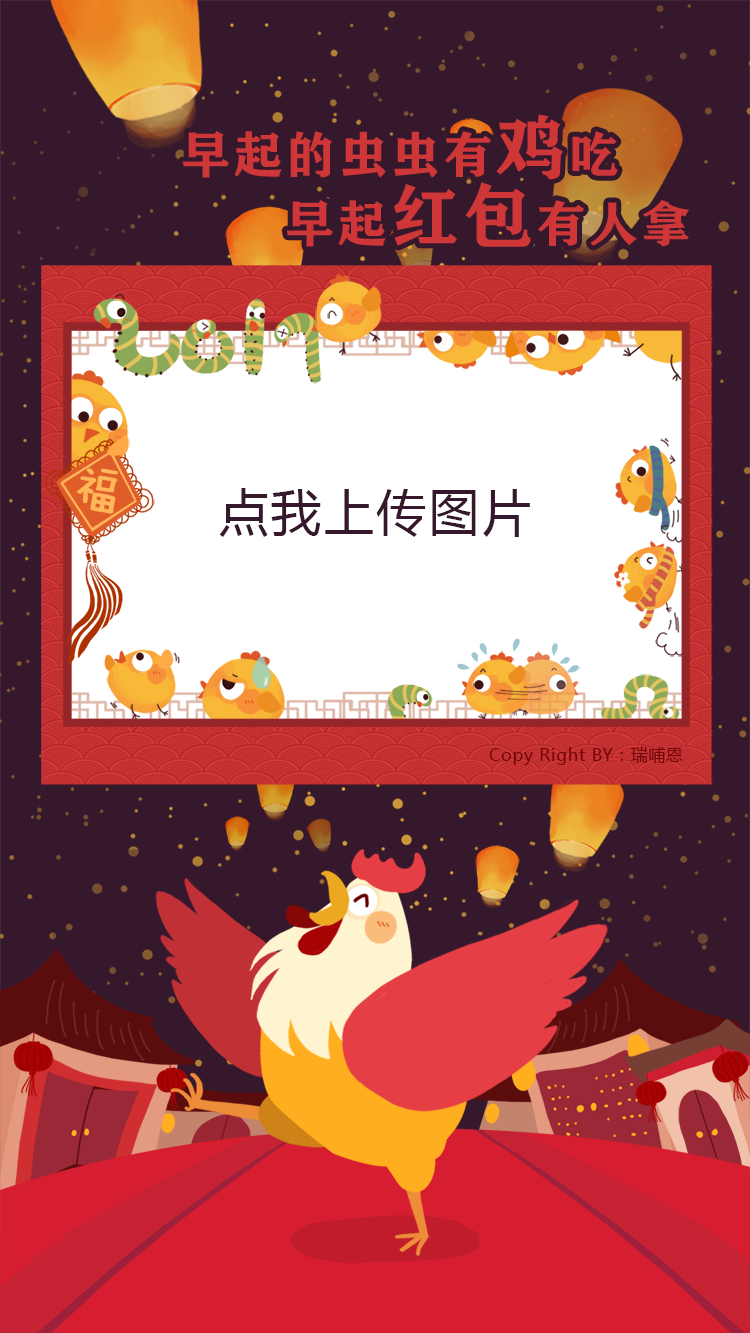
<style>
.page{position:relative;width:750px;height:1333px;background:#35182b}
.page>*{position:absolute;margin:0}
.t1{font:50px "FZCHSJW--GB1-0";letter-spacing:0.05em;color:#cf3637}
.t2{font:70px "FZCHSJW--GB1-0";letter-spacing:0.05em;color:#cf3637}
.t3{font:47.5px "FZMWJW--GB1-0";letter-spacing:0.14em;color:#ffb75a;font-weight:bold}
.t4{font:50px "MicrosoftYaHei";letter-spacing:0.05em;color:#35182b}
.t5{font:16.7px "MicrosoftYaHei";letter-spacing:0.05em;color:#720708}
</style>
<div class="page">
<p class="t1" style="left:182px;top:114px;width:436px;height:66px">早起的虫虫有<span class="t2">鸡</span>吃</p>
<p class="t1" style="left:286px;top:182px;width:404px;height:65px">早起<span class="t2">红包</span>有人拿</p>
<p class="t3" style="left:77px;top:467px;width:41px;height:47px;rotate:10deg">福</p>
<p class="t4" style="left:219px;top:488px;width:311px;height:49px">点我上传图片</p>
<p class="t5" style="left:489px;top:746px;width:194px;height:19px">Copy Right BY：瑞哺恩</p>
</div>
